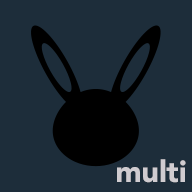
<style>
.page{position:relative;width:192px;height:192px;background:#1d2d3a}
.page>*{position:absolute;margin:0}
.t1{font:30px "Avenir-Black";color:#d0ccd0}
</style>
<div class="page">
<p class="t1" style="left:117px;top:159px;width:69px;height:24px">multi</p>
</div>
